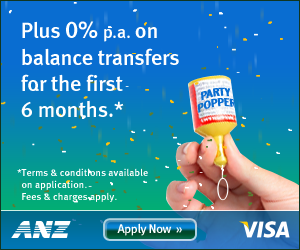
<style>
.page{position:relative;width:300px;height:250px;background:#096dd1}
.page>*{position:absolute;margin:0}
.t1{font:22px "MetaMediumLF-Roman";letter-spacing:-0.01em;color:#ffffff}
.t2{font:24px "MetaMediumLF-Roman";letter-spacing:-0.01em;color:#ffffff}
.t3{font:18px "MetaMediumLF-Roman";letter-spacing:-0.01em;color:#ffffff}
.t4{font:11.4px/10.2px "MetaBlack-Caps";letter-spacing:-0.01em;color:#096dd1}
.t5{font:10px "MetaMediumLF-Roman";letter-spacing:0.01em;color:#ffffff}
.t6{font:12.5px "MetaMediumLF-Roman";letter-spacing:-0.025em;color:#ffffff}
.t7{font:12.5px "MetaMediumLF-Roman";letter-spacing:-0.01em;color:#ffffff}
</style>
<div class="page">
<p class="t1" style="left:21px;top:21px;width:158px;height:96px">Plus <span class="t2">0% </span><span class="t3">p.a. </span>on<br>balance transfers<br>for the first<br>6 months.*</p>
<p class="t4" style="left:197px;top:87px;width:40px;height:26px;text-align:center;rotate:-8deg">PARTY<br>POPPER</p>
<p class="t5" style="left:17px;top:168px;width:131px;height:34px">*Terms &amp; conditions available <br>  on application. <br>  Fees &amp; charges apply.</p>
<p class="t6" style="left:117px;top:223px;width:65px;height:13px">Apply Now  <span class="t7">»</span></p>
</div>
